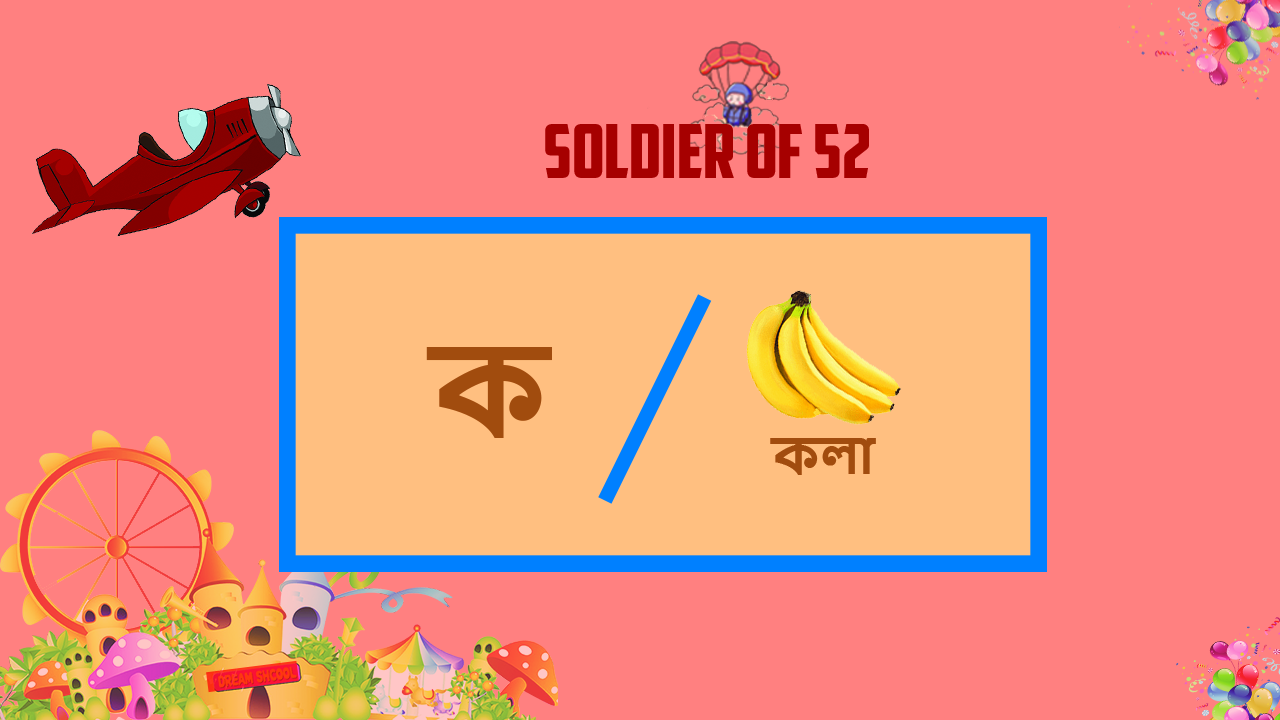
<style>
.page{position:relative;width:1280px;height:720px;background:#ff8080}
.page>*{position:absolute;margin:0}
.t1{font:74.5px "AmericanCaptain";color:#a60000}
.t2{font:122.1px "NirmalaUI-Bold";color:#a24b0d}
.t3{font:49.7px "NirmalaUI-Bold";color:#a24b0d}
</style>
<div class="page">
<p class="t1" style="left:545px;top:124px;width:324px;height:54px">SOLDIER OF 52</p>
<p class="t2" style="left:426px;top:347px;width:126px;height:91px">ক</p>
<p class="t3" style="left:770px;top:438px;width:106px;height:37px">কলা</p>
</div>
